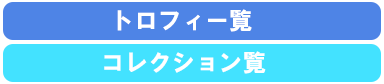
<style>
.page{position:relative;width:384px;height:84px;background:#4e84e6}
.page>*{position:absolute;margin:0}
.t1{font:24px "HGSSoeiKakugothicUB";color:#ffffff}
</style>
<div class="page">
<p class="t1" style="left:117px;top:9px;width:135px;height:23px">トロフィー覧</p>
<p class="t1" style="left:104px;top:51px;width:162px;height:23px">コレクション覧</p>
</div>
